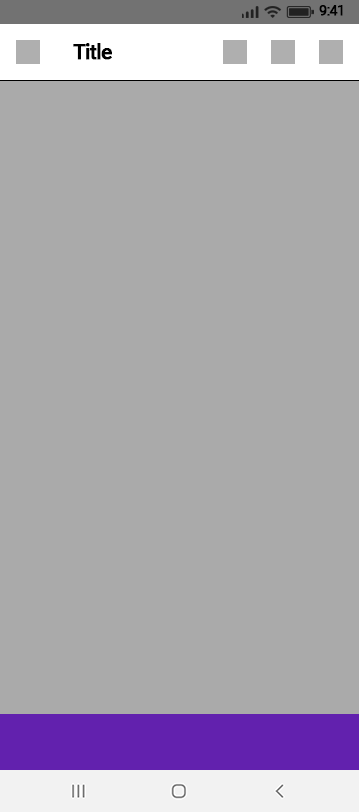
<style>
.page{position:relative;width:359px;height:812px;background:#aaaaaa}
.page>*{position:absolute;margin:0}
.t1{font:14px "Roboto-Regular";letter-spacing:-0.055em;color:#000000;font-weight:bold}
.t2{font:21px "Roboto-Medium";letter-spacing:-0.055em;color:#000000;font-weight:bold}
</style>
<div class="page">
<p class="t1" style="left:319px;top:5px;width:24px;height:11px">9:41</p>
<p class="t2" style="left:73px;top:43px;width:39px;height:17px">Title</p>
</div>
